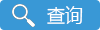
<style>
.page{position:relative;width:100px;height:30px;background:#3998d6}
.page>*{position:absolute;margin:0}
.t1{font:18px "MicrosoftYaHei";color:#ffffff}
</style>
<div class="page">
<p class="t1" style="left:47px;top:6px;width:36px;height:18px">查询</p>
</div>
